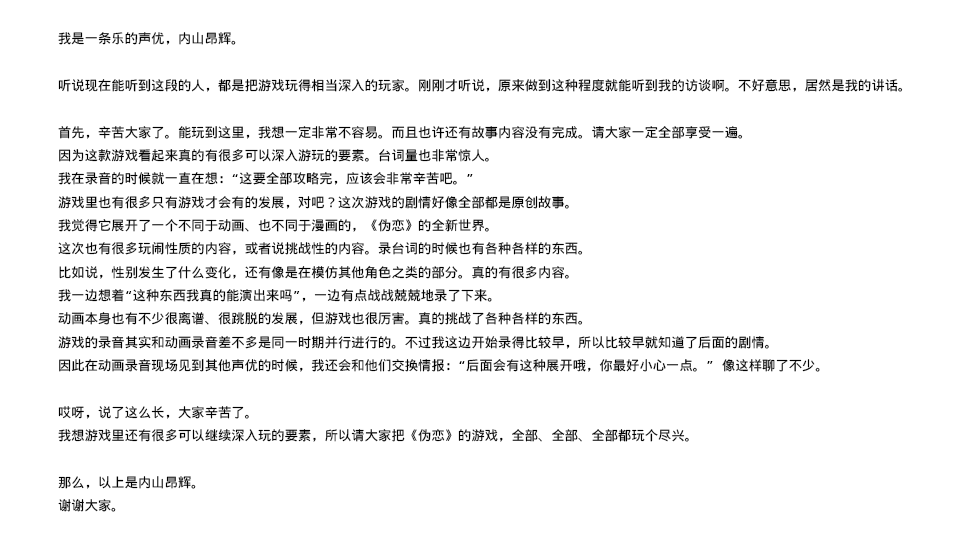
<style>
.page{position:relative;width:960px;height:544px;background:#ffffff}
.page>*{position:absolute;margin:0}
.t1{font:13.3px "WenQuanYiMicroHeiMono";color:#000000}
</style>
<div class="page">
<p class="t1" style="left:58px;top:32px;width:845px;height:480px">我是一条乐的声优，内山昂辉。<br><br>听说现在能听到这段的人，都是把游戏玩得相当深入的玩家。刚刚才听说，原来做到这种程度就能听到我的访谈啊。不好意思，居然是我的讲话。<br><br>首先，辛苦大家了。能玩到这里，我想一定非常不容易。而且也许还有故事内容没有完成。请大家一定全部享受一遍。<br>因为这款游戏看起来真的有很多可以深入游玩的要素。台词量也非常惊人。<br>我在录音的时候就一直在想：“这要全部攻略完，应该会非常辛苦吧。”<br>游戏里也有很多只有游戏才会有的发展，对吧？这次游戏的剧情好像全部都是原创故事。<br>我觉得它展开了一个不同于动画、也不同于漫画的，《伪恋》的全新世界。<br>这次也有很多玩闹性质的内容，或者说挑战性的内容。录台词的时候也有各种各样的东西。<br>比如说，性别发生了什么变化，还有像是在模仿其他角色之类的部分。真的有很多内容。<br>我一边想着“这种东西我真的能演出来吗”，一边有点战战兢兢地录了下来。<br>动画本身也有不少很离谱、很跳脱的发展，但游戏也很厉害。真的挑战了各种各样的东西。<br>游戏的录音其实和动画录音差不多是同一时期并行进行的。不过我这边开始录得比较早，所以比较早就知道了后面的剧情。<br>因此在动画录音现场见到其他声优的时候，我还会和他们交换情报：“后面会有这种展开哦，你最好小心一点。” 像这样聊了不少。<br><br>哎呀，说了这么长，大家辛苦了。<br>我想游戏里还有很多可以继续深入玩的要素，所以请大家把《伪恋》的游戏，全部、全部、全部都玩个尽兴。<br><br>那么，以上是内山昂辉。<br>谢谢大家。</p>
</div>
